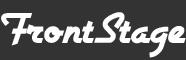
<style>
.page{position:relative;width:186px;height:60px;background:#333333}
.page>*{position:absolute;margin:0}
.t1{font:50.6px "Airstream";color:#ffffff}
</style>
<div class="page">
<p class="t1" style="left:1px;top:12px;width:185px;height:46px">FrontStage</p>
</div>
